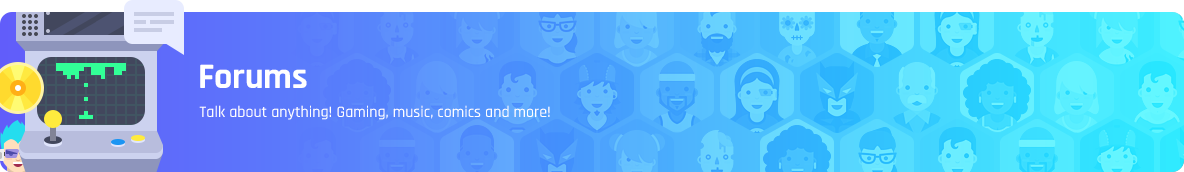
<style>
.page{position:relative;width:1184px;height:172px}
.page>*{position:absolute;margin:0}
.t1{font:36px "Rajdhani-Bold";color:#ffffff}
.t2{font:16px "Rajdhani-Medium";color:#ffffff}
</style>
<div class="page">
<p class="t1" style="left:200px;top:64px;width:107px;height:24px">Forums</p>
<p class="t2" style="left:199px;top:105px;width:351px;height:15px">Talk about anything! Gaming, music, comics and more!</p>
</div>
